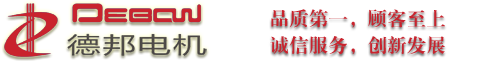
<style>
.page{position:relative;width:500px;height:62px;background:#ffffff}
.page>*{position:absolute;margin:0}
.t1{font:18.7px/26.7px "FZXBSJW--GB1-0";letter-spacing:0.05em;color:#c9232d}
</style>
<div class="page">
<p class="t1" style="left:270px;top:9px;width:175px;height:46px">品质第一，顾客至上<br>诚信服务，创新发展</p>
</div>
